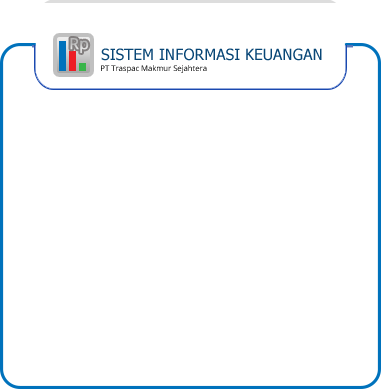
<style>
.page{position:relative;width:381px;height:392px;background:#ffffff}
.page>*{position:absolute;margin:0}
.t1{font:15.4px "OpenSans";color:#c5c5c5;font-weight:bold}
.t2{font:15.6px "Tahoma";color:#084676}
.t3{font:7.7px "OpenSans"}
</style>
<div class="page">
<p class="t1" style="left:70px;top:38px;width:19px;height:15px">Rp</p>
<p class="t2" style="left:101px;top:48px;width:221px;height:13px">SISTEM INFORMASI KEUANGAN</p>
<p class="t3" style="left:101px;top:65px;width:106px;height:8px">PT Traspac Makmur Sejahtera</p>
</div>
